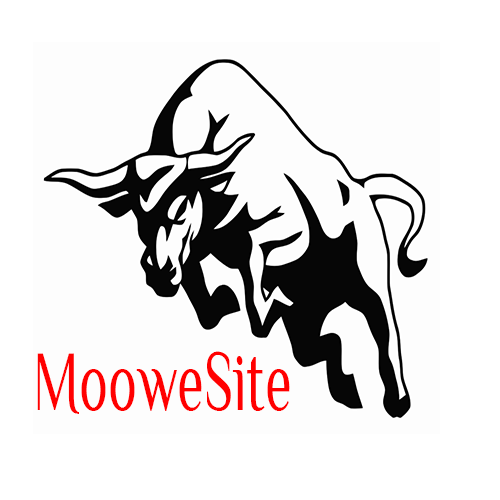
<style>
.page{position:relative;width:500px;height:500px;background:#fdfdfd}
.page>*{position:absolute;margin:0}
.t1{font:84.6px "ElMessiri-Regular";color:#ff0000;scale:0.65 1}
</style>
<div class="page">
<p class="t1" style="left:37px;top:351px;width:253px;height:63px">MooweSite</p>
</div>
